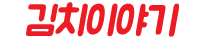
<style>
.page{position:relative;width:200px;height:40px;background:#ffffff}
.page>*{position:absolute;margin:0}
.t1{font:40px "BMJUA";letter-spacing:-0.05em;color:#ed1c24;font-style:italic}
</style>
<div class="page">
<p class="t1" style="left:26px;top:2px;width:153px;height:35px">김치이야기</p>
</div>
